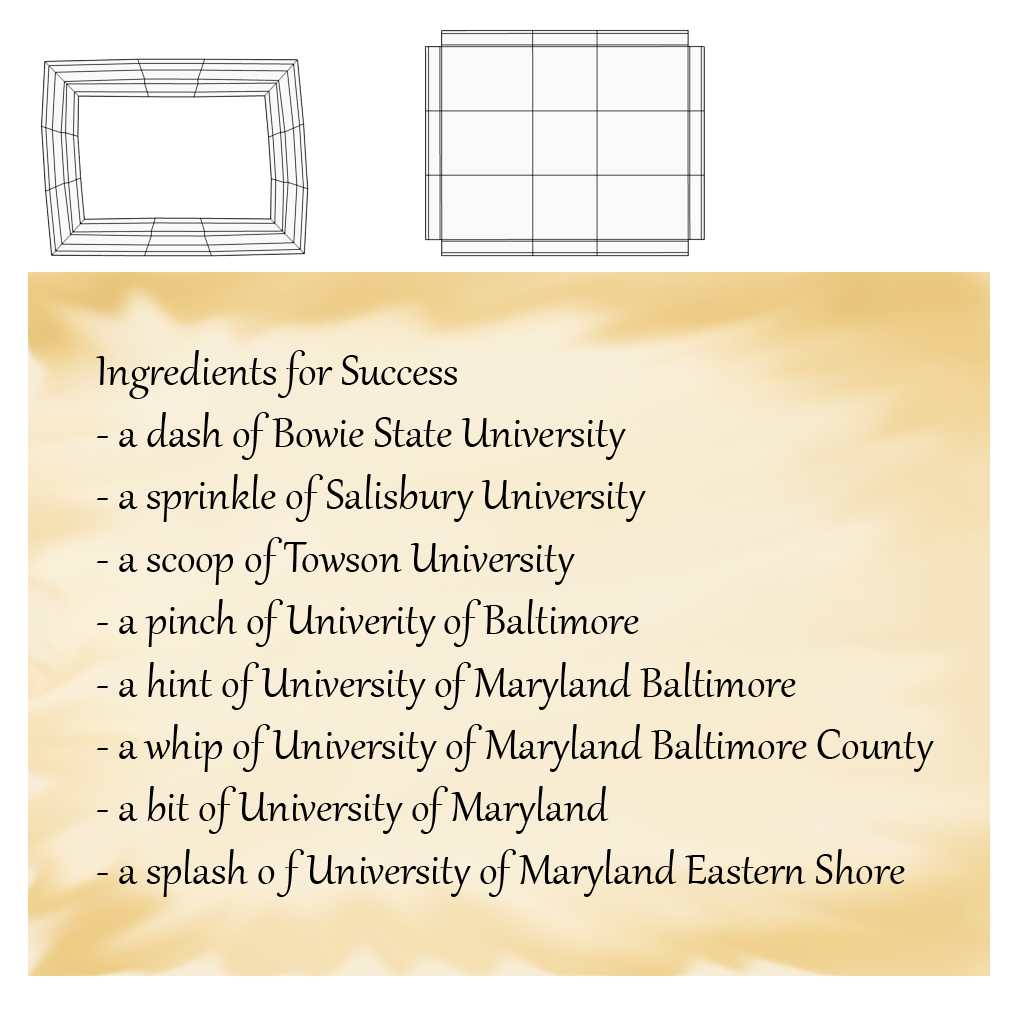
<style>
.page{position:relative;width:1024px;height:1024px;background:#ffffff}
.page>*{position:absolute;margin:0}
.t1{font:52px "Gabriola";color:#000000}
</style>
<div class="page">
<p class="t1" style="left:96px;top:350px;width:838px;height:547px">Ingredients for Success <br>- a dash of Bowie State University<br>- a sprinkle of Salisbury University<br>- a scoop of Towson University<br>- a pinch of Univerity of Baltimore<br>- a hint of University of Maryland Baltimore<br>- a whip of University of Maryland Baltimore County<br>- a bit of University of Maryland<br>- a splash o f University of Maryland Eastern Shore</p>
</div>
